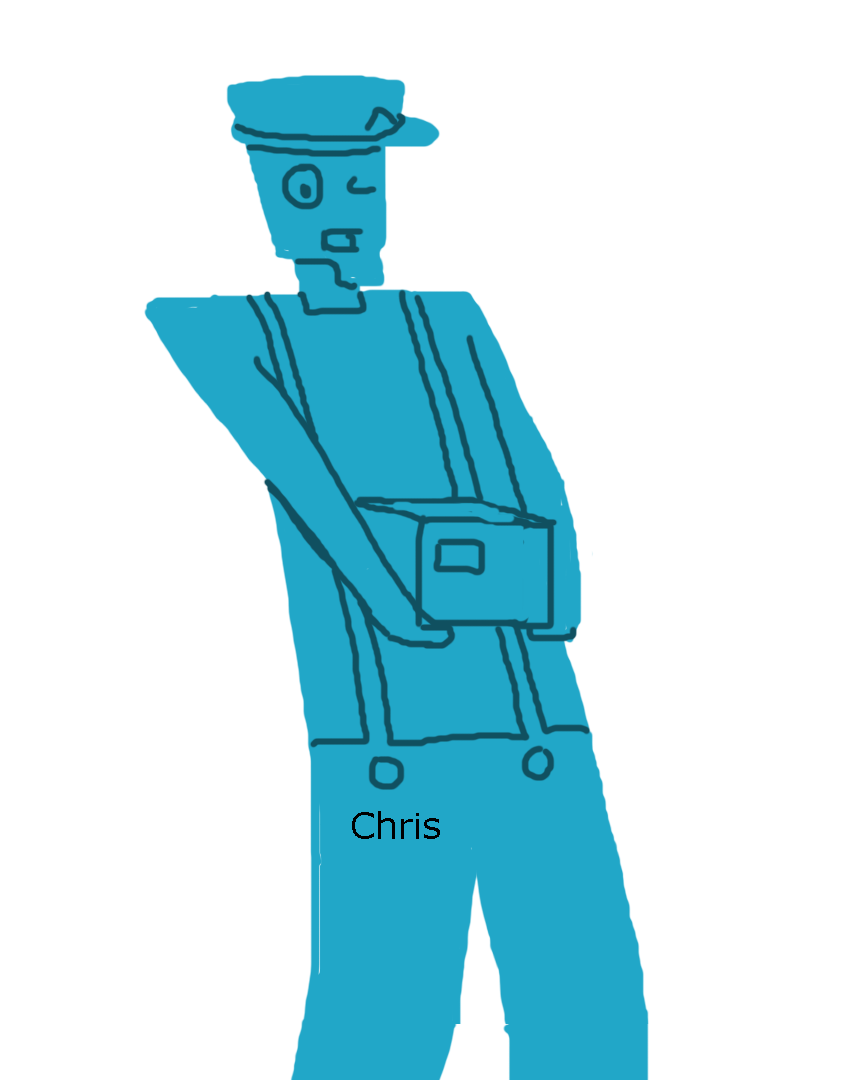
<style>
.page{position:relative;width:847px;height:1080px;background:#ffffff}
.page>*{position:absolute;margin:0}
.t1{font:35.9px "Verdana";color:#000000}
</style>
<div class="page">
<p class="t1" style="left:352px;top:811px;width:88px;height:28px">Chris</p>
</div>
